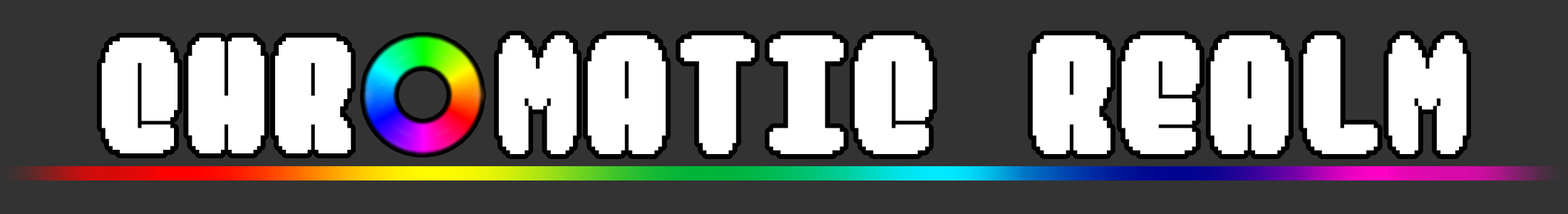
<style>
.page{position:relative;width:1568px;height:214px;background:#333333}
.page>*{position:absolute;margin:0}
.t1{font:115.6px "Hevuish";color:#ffffff}
.t2{font:118.6px "Hevuish";color:#ffffff}
</style>
<div class="page">
<p class="t1" style="left:101px;top:37px;width:250px;height:116px">CHR</p>
<p class="t2" style="left:498px;top:35px;width:969px;height:119px">MATIC REALM</p>
</div>
